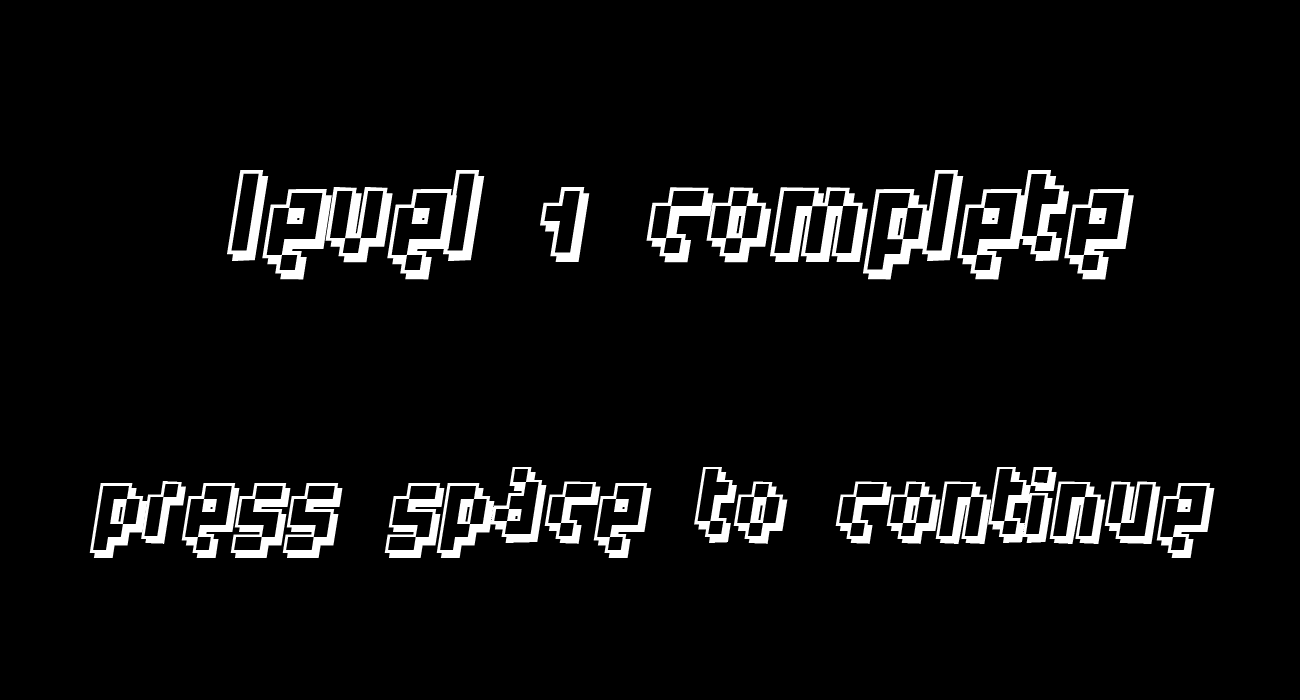
<style>
.page{position:relative;width:1300px;height:700px;background:#000000}
.page>*{position:absolute;margin:0}
.t1{font:120px "Humanoid";color:#ffffff}
.t2{font:100px "Humanoid";color:#ffffff}
</style>
<div class="page">
<p class="t1" style="left:227px;top:170px;width:907px;height:110px">Level 1 complete</p>
<p class="t2" style="left:89px;top:467px;width:1126px;height:91px">press space to continue</p>
</div>
